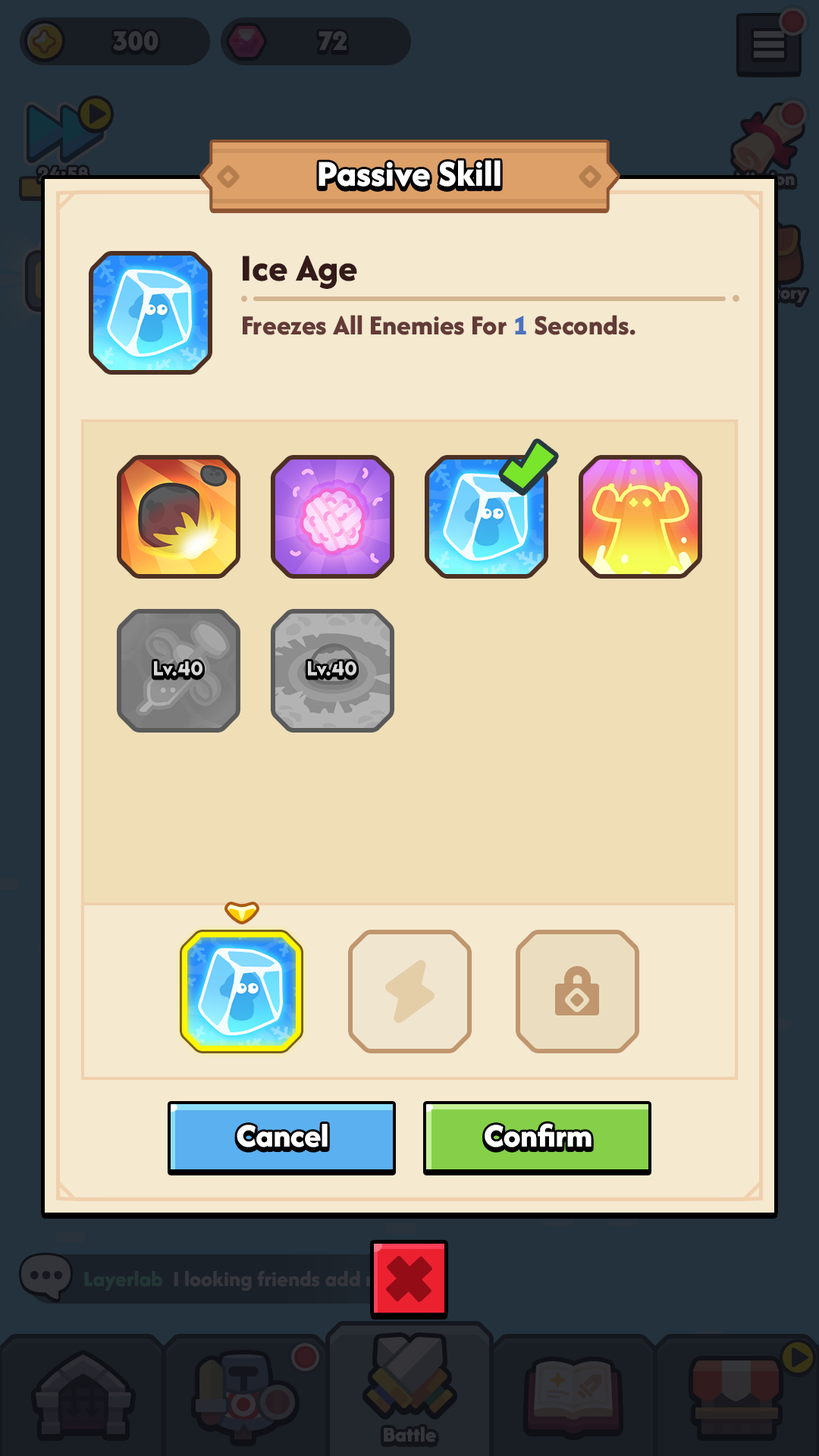
<style>
.page{position:relative;width:819px;height:1456px}
.page>*{position:absolute;margin:0}
.t1{font:37.9px "AfacadFlux-ExtraBold";color:#ffffff}
.t2{font:39.3px "AfacadFlux-ExtraBold";color:#341b19}
.t3{font:28.8px "AfacadFlux-ExtraBold";color:#633b37}
.t4{font:28.8px "AfacadFlux-ExtraBold";color:#4b71be}
.t5{font:20.5px "LTAvocado-Bold";color:#d8d8d8}
.t6{font:34.1px "AfacadFlux-ExtraBold";color:#ffffff}
</style>
<div class="page">
<p class="t1" style="left:318px;top:160px;width:182px;height:27px">Passive Skill</p>
<p class="t2" style="left:243px;top:256px;width:114px;height:33px">Ice Age</p>
<p class="t3" style="left:243px;top:315px;width:392px;height:20px">Freezes All Enemies For <span class="t4">1</span> Seconds.</p>
<p class="t5" style="left:154px;top:661px;width:48px;height:15px">Lv.40</p>
<p class="t5" style="left:308px;top:661px;width:48px;height:15px">Lv.40</p>
<p class="t6" style="left:237px;top:1124px;width:91px;height:23px">Cancel</p>
<p class="t6" style="left:485px;top:1123px;width:106px;height:24px">Confirm</p>
</div>
